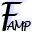
<style>
.page{position:relative;width:32px;height:32px;background:#ffffff}
.page>*{position:absolute;margin:0}
.t1{font:33.3px "LucidaHandwriting-Italic";color:#000000}
.t2{font:12.5px "LucidaHandwriting-Italic";letter-spacing:-0.1em;color:#000000;scale:0.85 1}
</style>
<div class="page">
<p class="t1" style="left:1px;top:2px;width:22px;height:29px">F</p>
<p class="t2" style="left:6px;top:20px;width:25px;height:11px">AMP</p>
</div>
